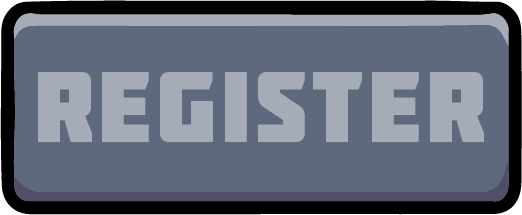
<style>
.page{position:relative;width:522px;height:215px;background:#5e697e}
.page>*{position:absolute;margin:0}
.t1{font:100px "Molot";letter-spacing:0.05em;color:#a5abb7}
</style>
<div class="page">
<p class="t1" style="left:38px;top:72px;width:446px;height:70px">Register</p>
</div>
